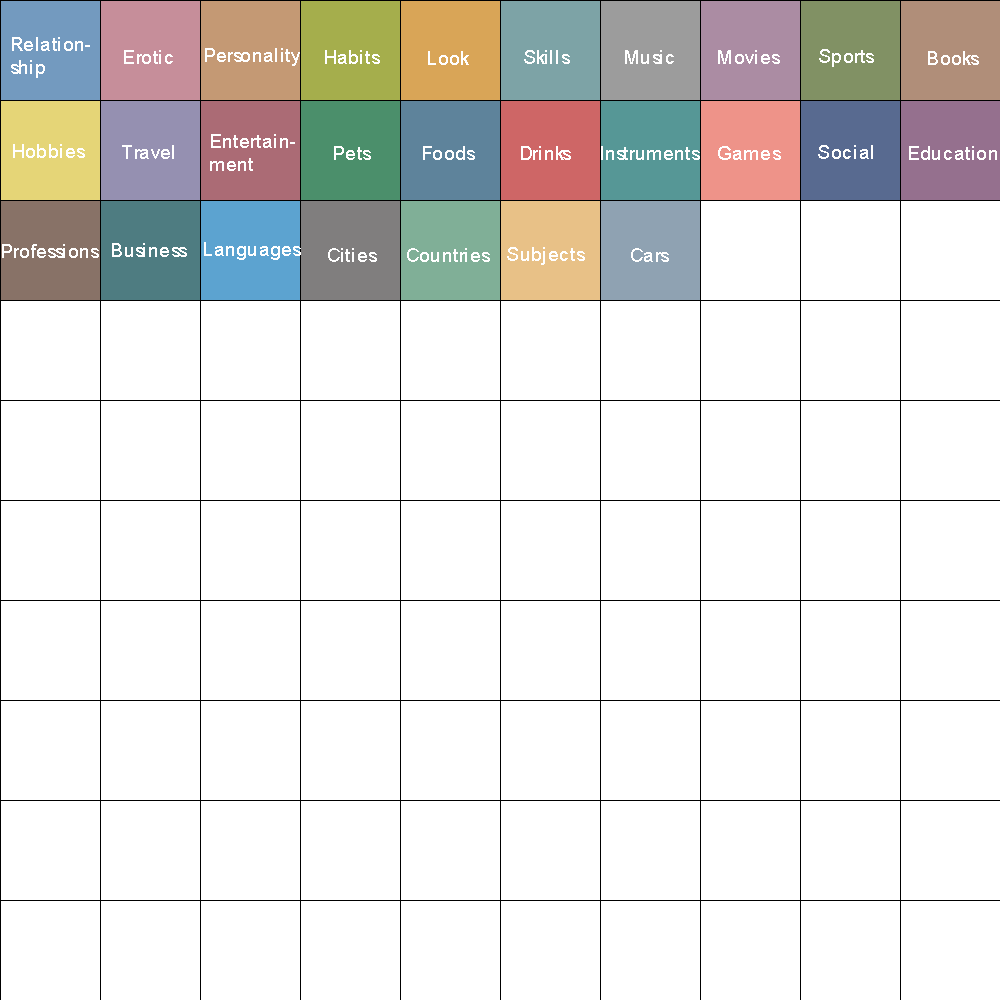
<style>
.page{position:relative;width:1000px;height:1000px;background:#ffffff}
.page>*{position:absolute;margin:0}
.t1{font:18.8px "ArialMT";color:#ffffff}
</style>
<div class="page">
<p class="t1" style="left:11px;top:37px;width:79px;height:41px">Relation-<br>ship</p>
<p class="t1" style="left:124px;top:50px;width:49px;height:14px">Erotic</p>
<p class="t1" style="left:205px;top:48px;width:95px;height:18px">Personality</p>
<p class="t1" style="left:325px;top:50px;width:55px;height:14px">Habits</p>
<p class="t1" style="left:428px;top:51px;width:41px;height:14px">Look</p>
<p class="t1" style="left:524px;top:50px;width:46px;height:14px">Skills</p>
<p class="t1" style="left:625px;top:50px;width:49px;height:14px">Music</p>
<p class="t1" style="left:718px;top:50px;width:62px;height:14px">Movies</p>
<p class="t1" style="left:819px;top:49px;width:55px;height:18px">Sports</p>
<p class="t1" style="left:928px;top:51px;width:51px;height:14px">Books</p>
<p class="t1" style="left:210px;top:134px;width:85px;height:37px">Entertain-<br>ment</p>
<p class="t1" style="left:13px;top:144px;width:72px;height:14px">Hobbies</p>
<p class="t1" style="left:122px;top:145px;width:52px;height:14px">Travel</p>
<p class="t1" style="left:334px;top:146px;width:37px;height:14px">Pets</p>
<p class="t1" style="left:423px;top:146px;width:52px;height:14px">Foods</p>
<p class="t1" style="left:521px;top:146px;width:50px;height:14px">Drinks</p>
<p class="t1" style="left:601px;top:146px;width:99px;height:14px">Instruments</p>
<p class="t1" style="left:718px;top:146px;width:63px;height:14px">Games</p>
<p class="t1" style="left:818px;top:145px;width:55px;height:14px">Social</p>
<p class="t1" style="left:909px;top:146px;width:88px;height:14px">Education</p>
<p class="t1" style="left:2px;top:244px;width:97px;height:14px">Professions</p>
<p class="t1" style="left:112px;top:243px;width:75px;height:14px">Business</p>
<p class="t1" style="left:204px;top:242px;width:97px;height:18px">Languages</p>
<p class="t1" style="left:328px;top:248px;width:49px;height:14px">Cities</p>
<p class="t1" style="left:407px;top:248px;width:83px;height:14px">Countries</p>
<p class="t1" style="left:507px;top:247px;width:78px;height:18px">Subjects</p>
<p class="t1" style="left:631px;top:248px;width:38px;height:14px">Cars</p>
</div>
